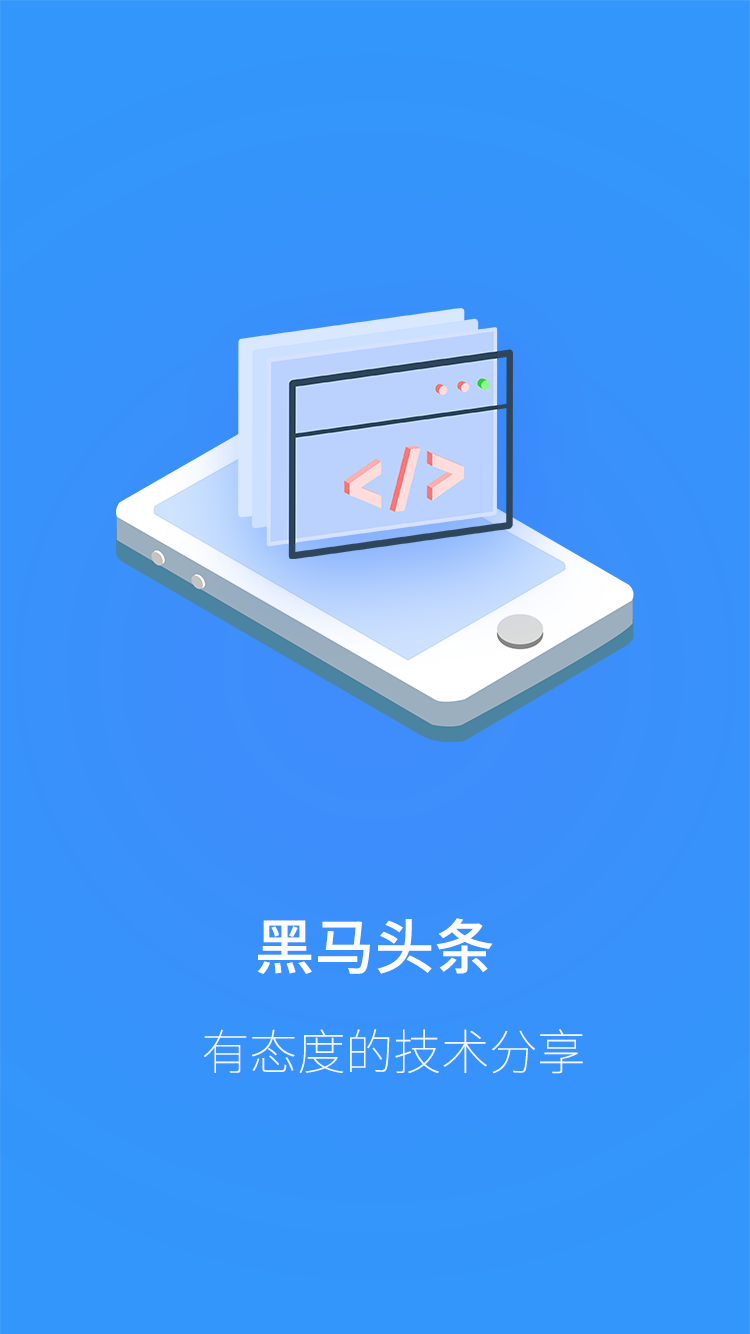
<style>
.page{position:relative;width:750px;height:1334px}
.page>*{position:absolute;margin:0}
.t1{font:60px "SourceHanSansCN-Medium";color:#fefeff}
.t2{font:48px "SourceHanSansCN-ExtraLight";color:#fefeff}
</style>
<div class="page">
<p class="t1" style="left:257px;top:918px;width:236px;height:56px">黑马头条</p>
<p class="t2" style="left:204px;top:1029px;width:379px;height:45px">有态度的技术分享</p>
</div>
